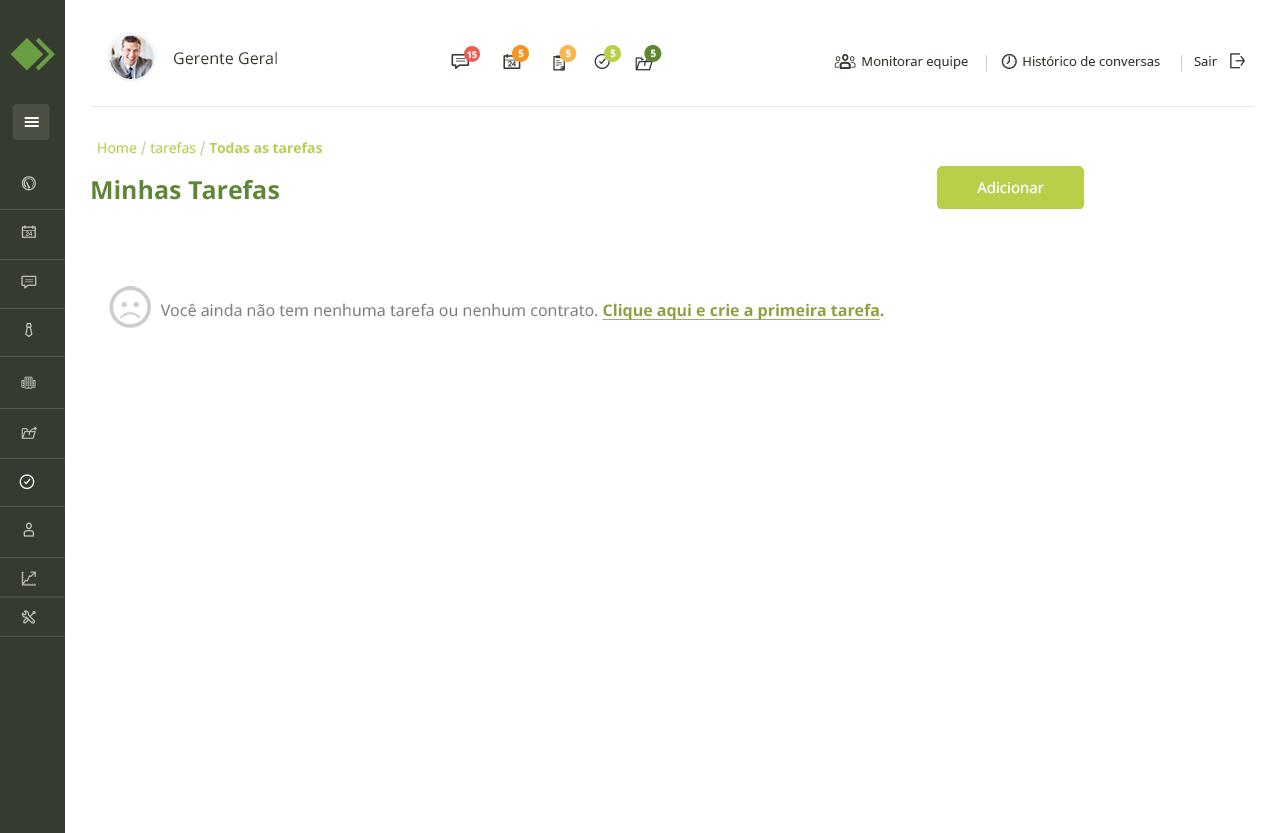
<style>
.page{position:relative;width:1280px;height:833px;background:#ffffff}
.page>*{position:absolute;margin:0}
.t1{font:16px "NotoSans";color:#353b2f}
.t2{font:9px "NotoSans-Bold";color:#ffffff}
.t3{font:10px "NotoSans-Bold";color:#ffffff}
.t4{font:13px "NotoSans";color:#353b2f}
.t5{font:14px "NotoSans-Bold";color:#b8cf49}
.t6{font:14px "NotoSans";color:#b8cf49}
.t7{font:14px "NotoSans";color:#c7cfa1}
.t8{font:25px "NotoSans-Bold";color:#5d8730}
.t9{font:15px "NotoSans";color:#ffffff}
.t10{font:16px "NotoSans";color:#808080}
.t11{font:16px "NotoSans-Bold";color:#8ea139;text-decoration:underline}
.t12{font:16px "NotoSans-Bold";color:#8ea139}
</style>
<div class="page">
<p class="t1" style="left:174px;top:51px;width:103px;height:14px">Gerente Geral</p>
<p class="t2" style="left:467px;top:51px;width:10px;height:8px">15</p>
<p class="t3" style="left:518px;top:49px;width:6px;height:9px">5</p>
<p class="t3" style="left:566px;top:49px;width:5px;height:9px">5</p>
<p class="t3" style="left:610px;top:49px;width:6px;height:9px">5</p>
<p class="t3" style="left:651px;top:49px;width:5px;height:9px">5</p>
<p class="t4" style="left:862px;top:56px;width:355px;height:13px">Monitorar equipe                Histórico de conversas          Sair</p>
<p class="t5" style="left:98px;top:141px;width:224px;height:15px"><span class="t6">Home </span><span class="t7">/</span><span class="t6"> tarefas </span><span class="t7">/ </span>Todas as tarefas</p>
<p class="t8" style="left:92px;top:179px;width:187px;height:21px">Minhas Tarefas</p>
<p class="t9" style="left:977px;top:181px;width:67px;height:13px">Adicionar</p>
<p class="t10" style="left:160px;top:303px;width:724px;height:17px">Você ainda não tem nenhuma tarefa ou nenhum contrato. <span class="t11">Clique aqui e crie a primeira tarefa</span><span class="t12">.</span></p>
</div>
